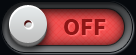
<style>
.page{position:relative;width:136px;height:55px}
.page>*{position:absolute;margin:0}
.t1{font:25px "SourceSansPro-Bold";color:#8e1515}
</style>
<div class="page">
<p class="t1" style="left:64px;top:19px;width:42px;height:16px">OFF</p>
</div>
